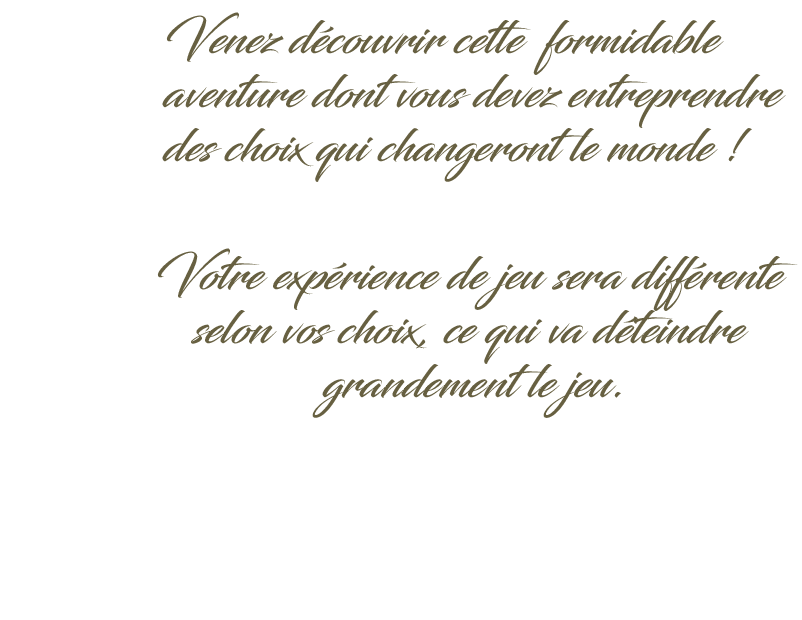
<style>
.page{position:relative;width:802px;height:620px;background:#ffffff}
.page>*{position:absolute;margin:0}
.t1{font:10.8px "Blacksword";color:#676041}
</style>
<div class="page">
<p class="t1" style="left:162px;top:12px;width:624px;height:170px">Venez découvrir cette  formidable<br>aventure dont vous devez entreprendre <br>des choix qui changeront le monde !</p>
<p class="t1" style="left:157px;top:248px;width:641px;height:170px;text-align:center">Votre expérience de jeu sera différente<br>selon vos choix, ce qui va déteindre<br> grandement le jeu.</p>
</div>
